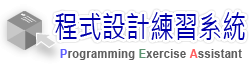
<style>
.page{position:relative;width:250px;height:70px;background:#ffffff}
.page>*{position:absolute;margin:0}
.t1{font:30px "MicrosoftJhengHeiRegular";color:#0000aa;scale:0.8 1}
.t2{font:12px "Arial-BoldMT";letter-spacing:0.01em;color:#5e5e5e;scale:0.95 1}
</style>
<div class="page">
<p class="t1" style="left:55px;top:12px;width:190px;height:28px">程式設計練習系統</p>
<p class="t2" style="left:60px;top:49px;width:182px;height:11px">Programming Exercise Assistant</p>
</div>
